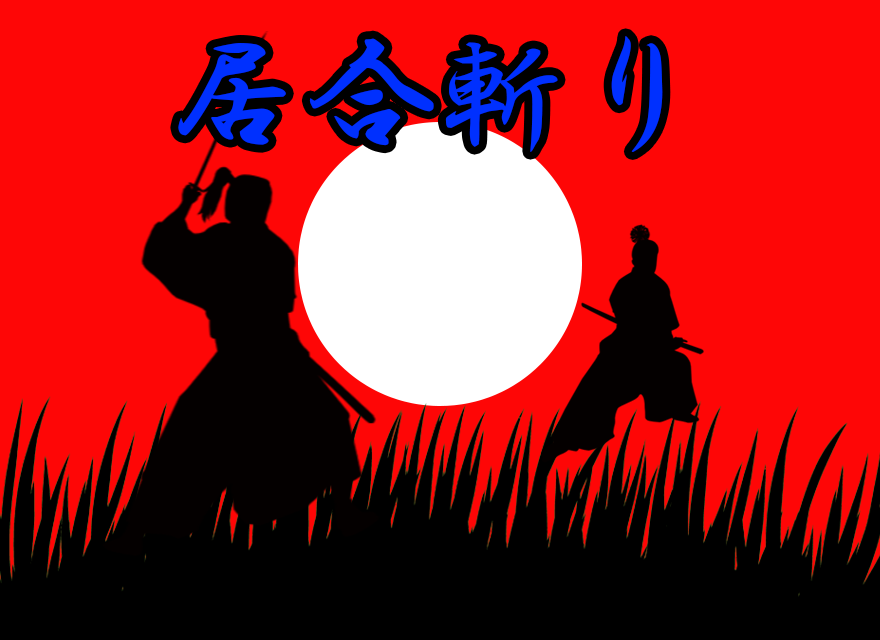
<style>
.page{position:relative;width:880px;height:640px;background:#fe0606}
.page>*{position:absolute;margin:0}
.t1{font:133.3px "HGSGyoshotai";color:#0030fe}
</style>
<div class="page">
<p class="t1" style="left:178px;top:36px;width:485px;height:116px">居合斬り</p>
</div>
